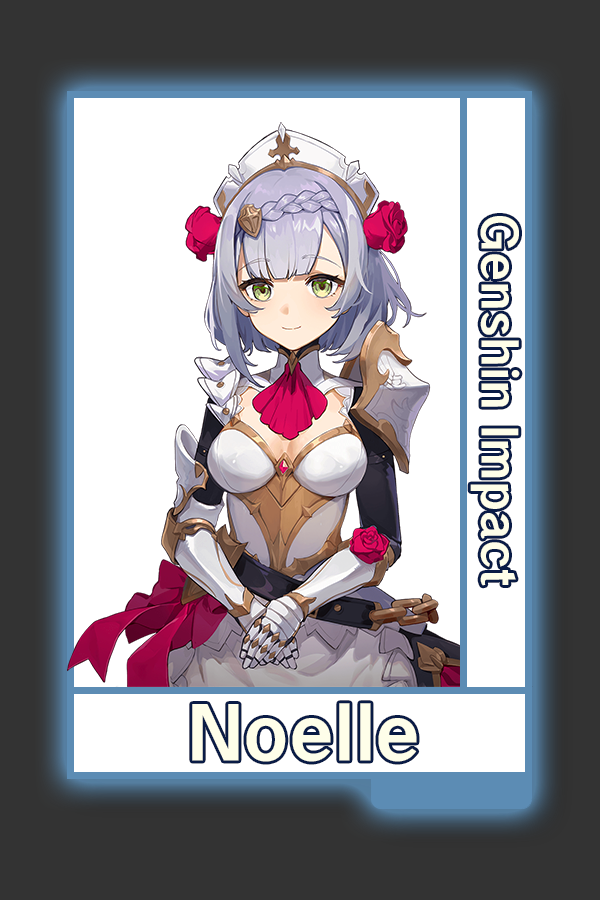
<style>
.page{position:relative;width:600px;height:900px;background:#ffffff}
.page>*{position:absolute;margin:0}
.t1{font:48.8px "HYWenHei-HEW";color:#fefef4}
.t2{font:75px "HYWenHei-HEW";color:#fefef4}
</style>
<div class="page">
<p class="t1" style="left:470px;top:216px;width:50px;height:370px;rotate:90deg">Genshin Impact</p>
<p class="t2" style="left:192px;top:703px;width:225px;height:59px">Noelle</p>
</div>
